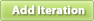
<style>
.page{position:relative;width:94px;height:21px}
.page>*{position:absolute;margin:0}
.t1{font:12px "MyriadPro-Bold";letter-spacing:-0.015em;color:#ffffff;font-weight:bold}
</style>
<div class="page">
<p class="t1" style="left:12px;top:5px;width:73px;height:10px">Add Iteration</p>
</div>
